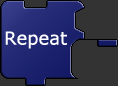
<style>
.page{position:relative;width:118px;height:86px;background:#333333}
.page>*{position:absolute;margin:0}
.t1{font:18px "Verdana";color:#ffffff}
</style>
<div class="page">
<p class="t1" style="left:5px;top:31px;width:62px;height:18px">Repeat</p>
</div>
